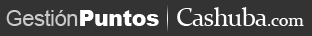
<style>
.page{position:relative;width:312px;height:36px;background:#333333}
.page>*{position:absolute;margin:0}
.t1{font:22.1px "ArialMT";letter-spacing:-0.025em;color:#c9c9c9}
.t2{font:22.1px "Arial-Black";letter-spacing:-0.025em;color:#ffffff}
.t3{font:25.6px "Constantia";letter-spacing:-0.025em;color:#ffffff}
.t4{font:18px "Constantia";letter-spacing:-0.025em;color:#ffffff}
</style>
<div class="page">
<p class="t1" style="left:6px;top:10px;width:72px;height:16px">Gestión</p>
<p class="t2" style="left:80px;top:10px;width:79px;height:16px">Puntos</p>
<p class="t3" style="left:177px;top:7px;width:127px;height:19px">Cashuba<span class="t4">.com</span></p>
</div>
